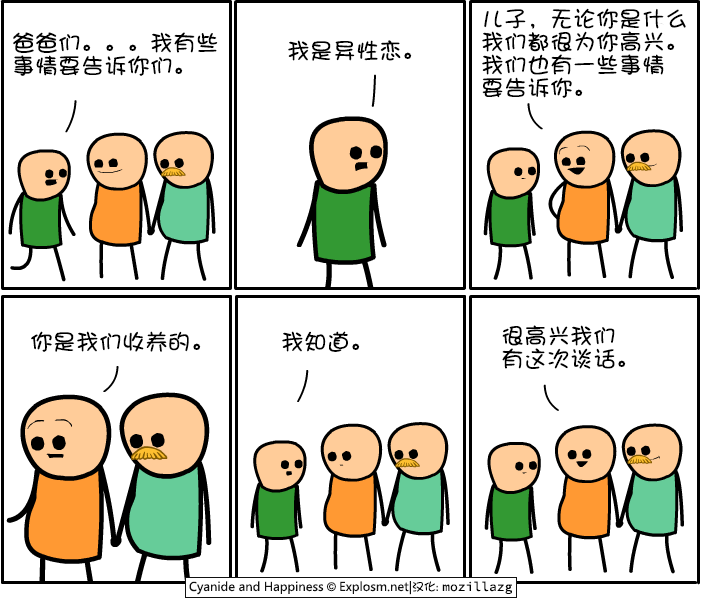
<style>
.page{position:relative;width:701px;height:599px;background:#ffffff}
.page>*{position:absolute;margin:0}
.t1{font:23px/23px "DFShaoNvW5";color:#000000}
.t2{font:23px "DFShaoNvW5";color:#000000}
</style>
<div class="page">
<p class="t1" style="left:482px;top:8px;width:204px;height:90px">儿子，无论你是什么<br>我们都很为你高兴。<br>我们也有一些事情<br>要告诉你。</p>
<p class="t1" style="left:13px;top:32px;width:205px;height:44px">爸爸们。。。我有些<br>事情要告诉你们。</p>
<p class="t2" style="left:288px;top:40px;width:124px;height:21px">我是异性恋。</p>
<p class="t1" style="left:502px;top:325px;width:124px;height:44px">很高兴我们<br>有这次谈话。</p>
<p class="t2" style="left:31px;top:331px;width:170px;height:21px">你是我们收养的。</p>
<p class="t2" style="left:282px;top:331px;width:78px;height:21px">我知道。</p>
</div>
